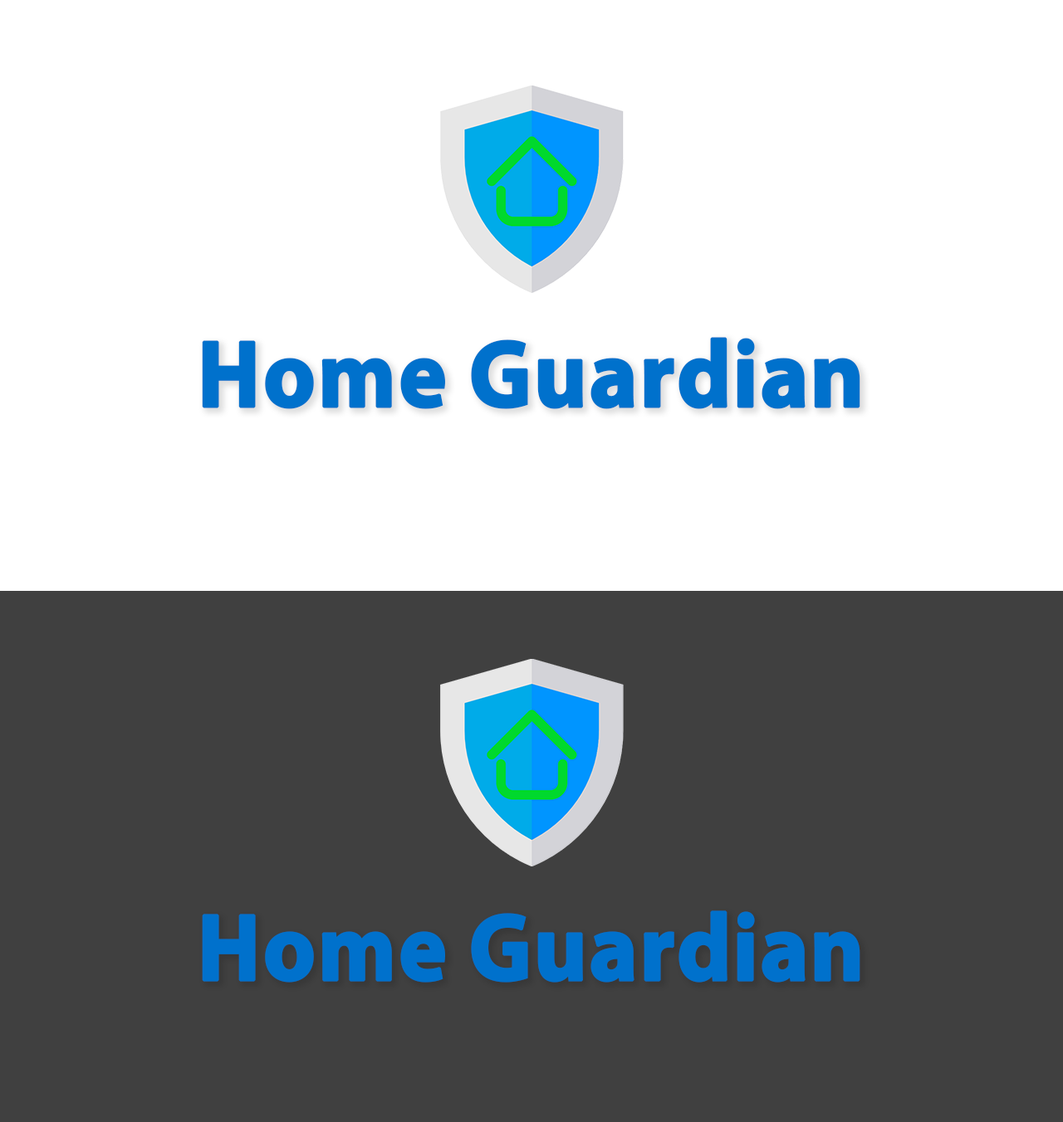
<style>
.page{position:relative;width:1063px;height:1122px;background:#ffffff}
.page>*{position:absolute;margin:0}
.t1{font:95.6px "MyriadPro-Bold";color:#0071cc;font-weight:bold;scale:0.95 1}
</style>
<div class="page">
<p class="t1" style="left:202px;top:337px;width:658px;height:72px">Home Guardian</p>
<p class="t1" style="left:202px;top:911px;width:658px;height:72px">Home Guardian</p>
</div>
